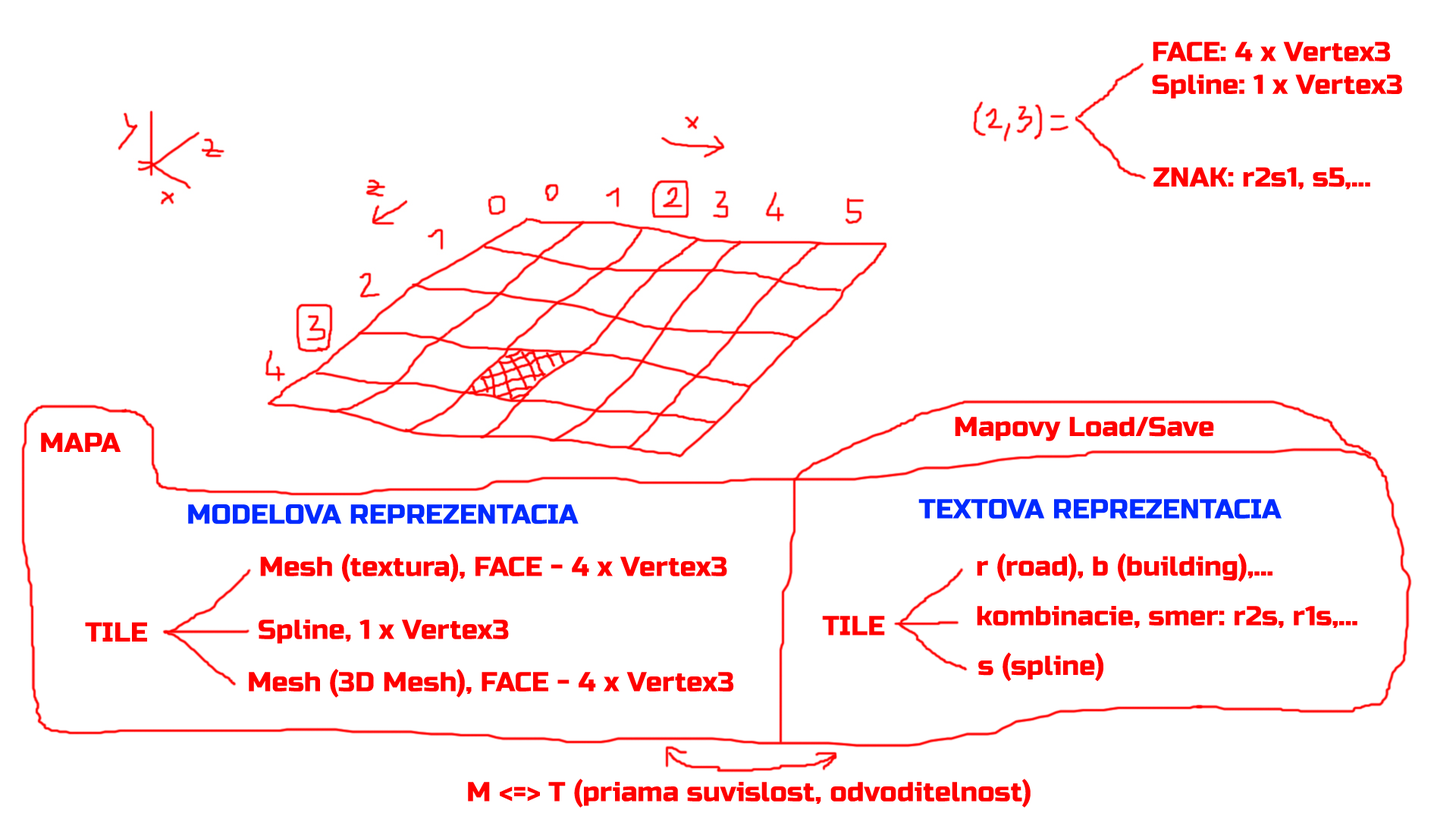
<style>
.page{position:relative;width:1456px;height:819px;background:#ffffff}
.page>*{position:absolute;margin:0}
.t1{font:27.3px "RussoOne-Regular";color:#ff0000}
.t2{font:27.3px "RussoOne-Regular";color:#002aff}
</style>
<div class="page">
<p class="t1" style="left:1152px;top:42px;width:250px;height:57px">FACE: 4 x Vertex3<br>Spline: 1 x Vertex3</p>
<p class="t1" style="left:1153px;top:167px;width:217px;height:23px">ZNAK: r2s1, s5,...</p>
<p class="t1" style="left:955px;top:416px;width:259px;height:25px">Mapovy Load/Save</p>
<p class="t1" style="left:41px;top:432px;width:80px;height:20px">MAPA</p>
<p class="t2" style="left:188px;top:504px;width:391px;height:20px">MODELOVA REPREZENTACIA</p>
<p class="t2" style="left:918px;top:499px;width:364px;height:20px">TEXTOVA REPREZENTACIA</p>
<p class="t1" style="left:260px;top:554px;width:467px;height:28px">Mesh (textura), FACE - 4 x Vertex3</p>
<p class="t1" style="left:977px;top:553px;width:295px;height:29px">r (road), b (building),...</p>
<p class="t1" style="left:977px;top:606px;width:380px;height:22px">kombinacie, smer: r2s, r1s,...</p>
<p class="t1" style="left:822px;top:616px;width:63px;height:19px">TILE</p>
<p class="t1" style="left:85px;top:622px;width:62px;height:20px">TILE</p>
<p class="t1" style="left:259px;top:620px;width:250px;height:24px">Spline, 1 x Vertex3</p>
<p class="t1" style="left:978px;top:652px;width:125px;height:30px">s (spline)</p>
<p class="t1" style="left:249px;top:669px;width:485px;height:29px">Mesh (3D Mesh), FACE - 4 x Vertex3</p>
<p class="t1" style="left:468px;top:779px;width:563px;height:29px">M &lt;=&gt; T (priama suvislost, odvoditelnost)</p>
</div>
